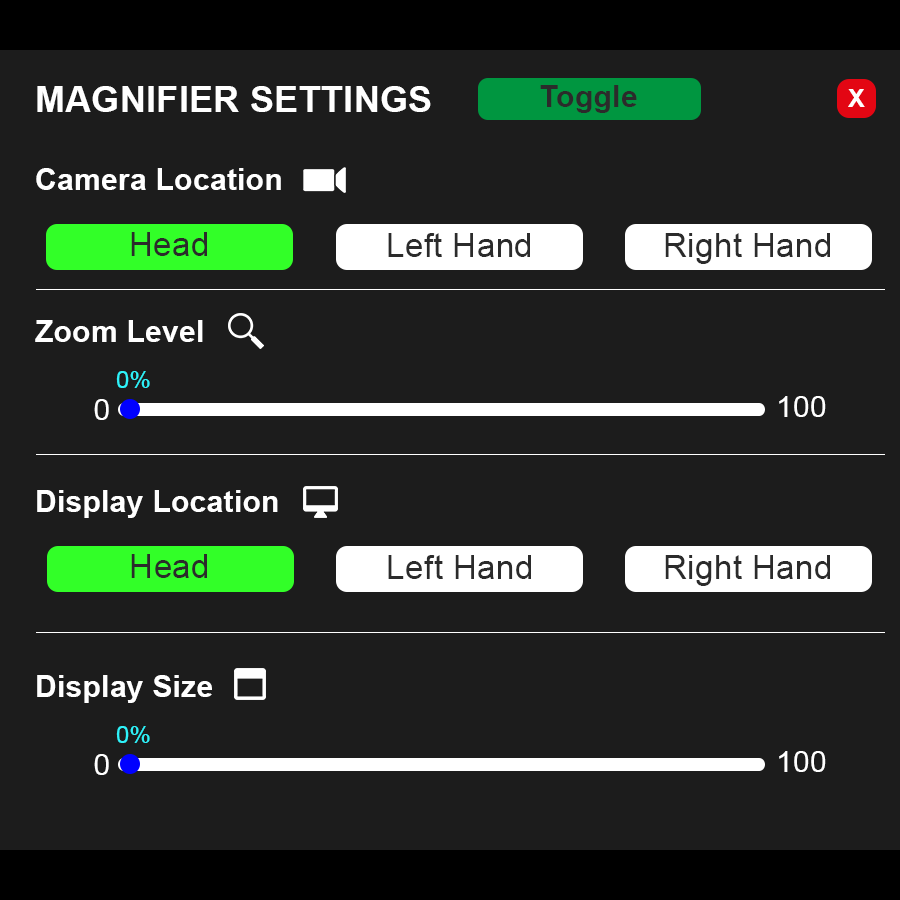
<style>
.page{position:relative;width:900px;height:900px;background:#1c1c1c}
.page>*{position:absolute;margin:0}
.t1{font:35.6px "Arial-BoldMT";letter-spacing:0.01em;color:#ffffff}
.t2{font:30px "Arial-BoldMT";letter-spacing:0.01em;color:#2b2b2b}
.t3{font:25.1px "Arial-BoldMT";letter-spacing:0.01em;color:#ffffff}
.t4{font:30px "Arial-BoldMT";letter-spacing:0.01em;color:#ffffff}
.t5{font:33px "ArialMT";letter-spacing:0.01em;color:#2b2b2b}
.t6{font:23.8px "ArialMT";letter-spacing:0.01em;color:#2ef2f9}
.t7{font:29.3px "ArialMT";letter-spacing:0.01em;color:#ffffff}
</style>
<div class="page">
<p class="t1" style="left:37px;top:86px;width:394px;height:26px">MAGNIFIER SETTINGS</p>
<p class="t2" style="left:540px;top:85px;width:97px;height:28px">Toggle</p>
<p class="t3" style="left:848px;top:89px;width:17px;height:18px">X</p>
<p class="t4" style="left:36px;top:168px;width:245px;height:22px">Camera Location</p>
<p class="t5" style="left:131px;top:232px;width:76px;height:24px">Head</p>
<p class="t5" style="left:388px;top:233px;width:142px;height:24px">Left Hand</p>
<p class="t5" style="left:665px;top:233px;width:165px;height:31px">Right Hand</p>
<p class="t4" style="left:35px;top:320px;width:168px;height:22px">Zoom Level</p>
<p class="t6" style="left:116px;top:371px;width:34px;height:17px">0%</p>
<p class="t7" style="left:94px;top:399px;width:15px;height:21px">0</p>
<p class="t7" style="left:779px;top:396px;width:47px;height:21px">100</p>
<p class="t4" style="left:37px;top:490px;width:241px;height:28px">Display Location</p>
<p class="t5" style="left:131px;top:554px;width:76px;height:24px">Head</p>
<p class="t5" style="left:388px;top:555px;width:143px;height:24px">Left Hand</p>
<p class="t5" style="left:665px;top:555px;width:165px;height:31px">Right Hand</p>
<p class="t4" style="left:37px;top:675px;width:175px;height:28px">Display Size</p>
<p class="t6" style="left:116px;top:726px;width:34px;height:17px">0%</p>
<p class="t7" style="left:94px;top:754px;width:15px;height:21px">0</p>
<p class="t7" style="left:779px;top:751px;width:47px;height:21px">100</p>
</div>
